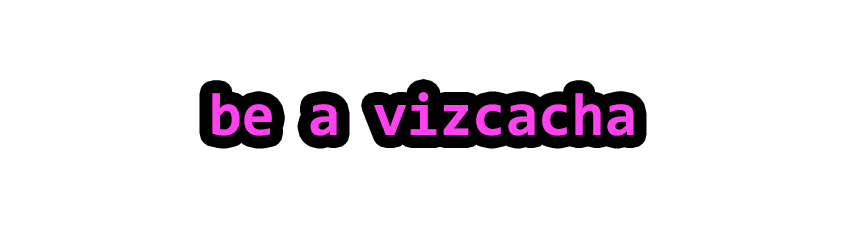
<style>
.page{position:relative;width:864px;height:244px;background:#ffffff}
.page>*{position:absolute;margin:0}
.t1{font:60px "Consolas-Bold";color:#ff41ef}
</style>
<div class="page">
<p class="t1" style="left:212px;top:92px;width:422px;height:44px">be a vizcacha</p>
</div>
